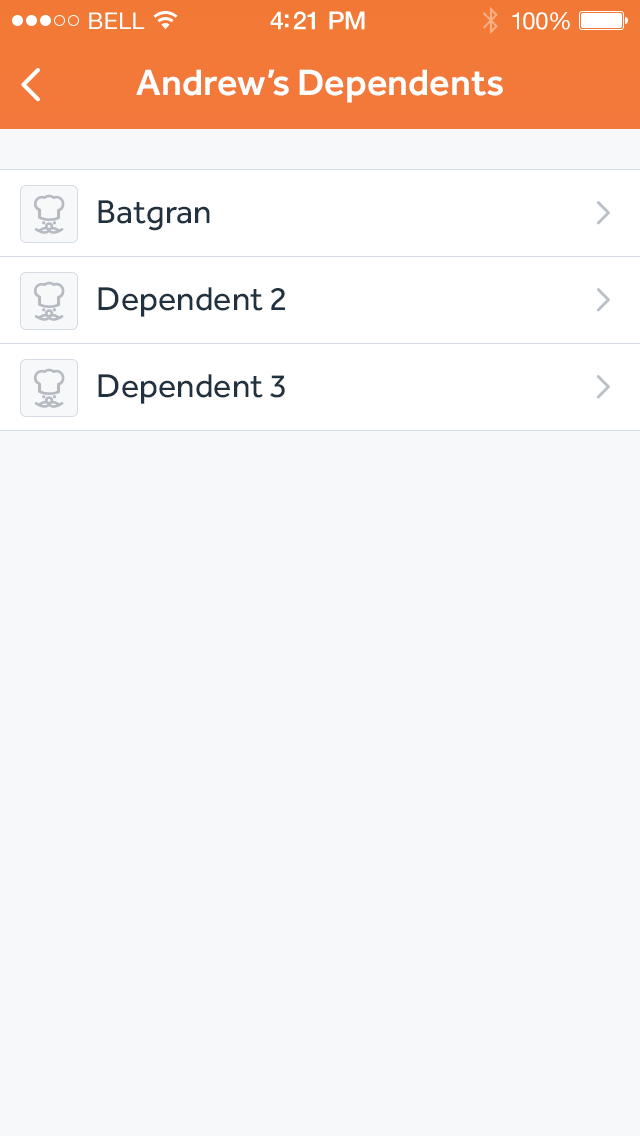
<style>
.page{position:relative;width:640px;height:1136px;background:#f6f8fa}
.page>*{position:absolute;margin:0}
.t1{font:23px "HelveticaNeue";letter-spacing:0.02em;color:#ffffff}
.t2{font:25px "HelveticaNeue-Medium";letter-spacing:-0.02em;color:#ffffff}
.t3{font:24px "HelveticaNeue";letter-spacing:-0.02em;color:#ffffff}
.t4{font:38px "Effra-Medium";color:#ffffff}
.t5{font:34px "Effra-Regular";color:#22313f}
</style>
<div class="page">
<p class="t1" style="left:89px;top:12px;width:56px;height:17px">BELL</p>
<p class="t2" style="left:270px;top:11px;width:95px;height:19px">4:21 PM</p>
<p class="t3" style="left:512px;top:12px;width:58px;height:18px">100%</p>
<p class="t4" style="left:136px;top:69px;width:367px;height:34px">Andrew’s Dependents</p>
<p class="t5" style="left:98px;top:200px;width:112px;height:31px">Batgran</p>
<p class="t5" style="left:98px;top:287px;width:187px;height:30px">Dependent 2</p>
<p class="t5" style="left:98px;top:374px;width:187px;height:30px">Dependent 3</p>
</div>
